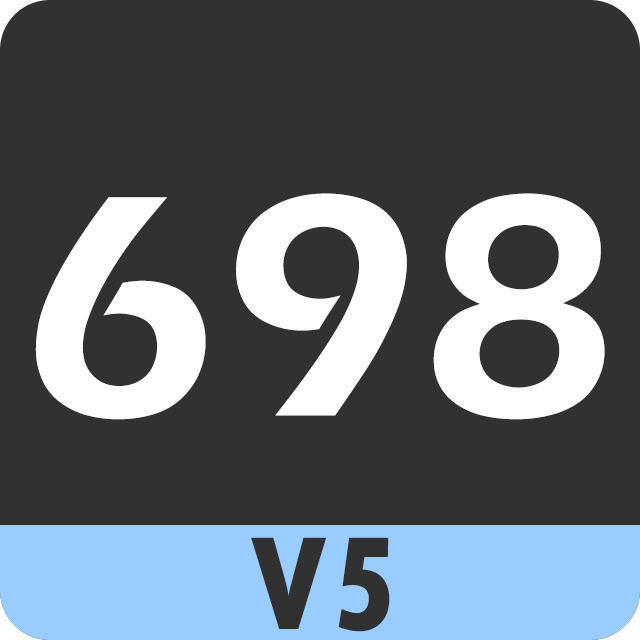
<style>
.page{position:relative;width:640px;height:640px;background:#313131}
.page>*{position:absolute;margin:0}
.t1{font:327.1px "ErasITC-Demi";color:#ffffff}
.t2{font:138.6px "TwCenMT-CondensedExtraBold";color:#313131;font-weight:bold}
</style>
<div class="page">
<p class="t1" style="left:35px;top:193px;width:570px;height:227px">698</p>
<p class="t2" style="left:251px;top:537px;width:139px;height:95px">V5</p>
</div>
